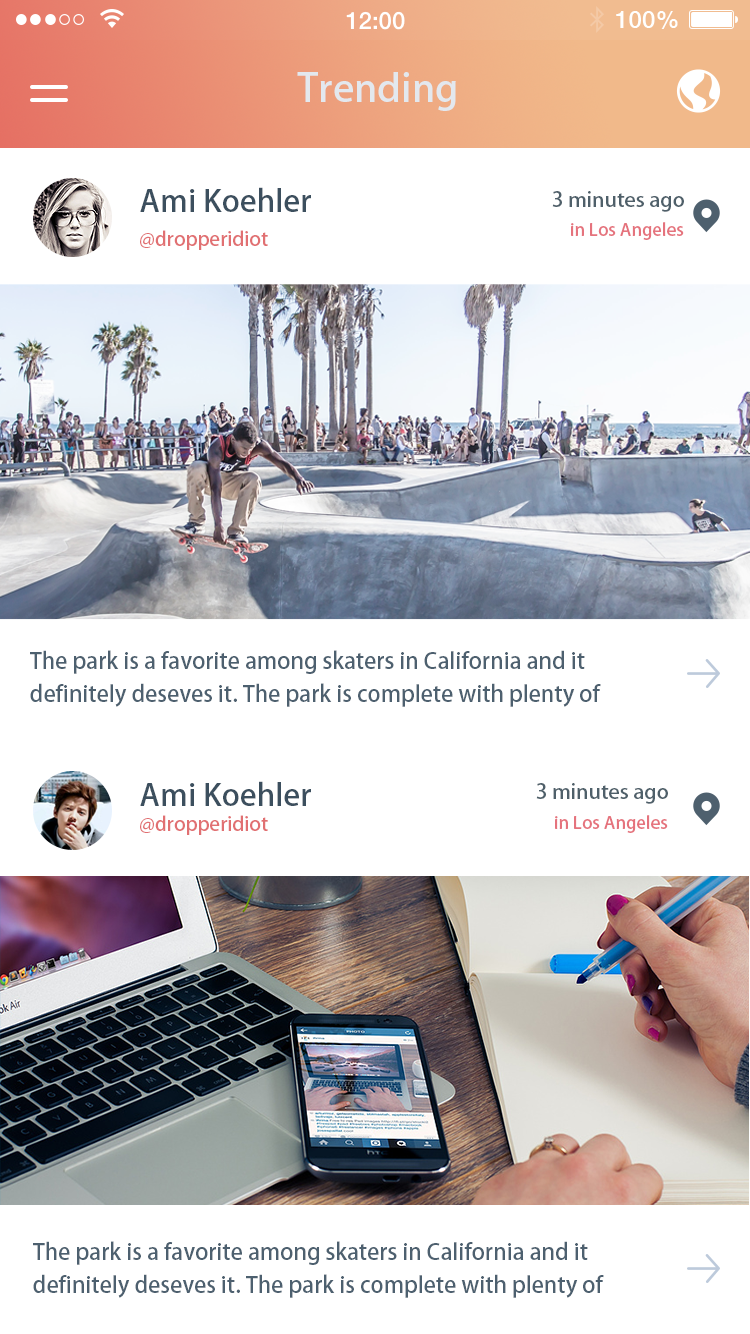
<style>
.page{position:relative;width:750px;height:1334px;background:#ffffff}
.page>*{position:absolute;margin:0}
.t1{font:38px "AdobeHeitiStd-Regular";color:#e3e8ee;scale:1.03 1}
.t2{font:30px "AdobeHeitiStd-Regular";color:#3c4f5e;scale:1.03 1}
.t3{font:20px "AdobeHeitiStd-Regular";color:#4f606a;scale:1.03 1}
.t4{font:17px "AdobeHeitiStd-Regular";color:#e5737d;scale:1.03 1}
.t5{font:19px "AdobeHeitiStd-Regular";color:#e17072;scale:1.03 1}
.t6{font:22px/33px "AdobeHeitiStd-Regular";color:#4d606f}
</style>
<div class="page">
<p class="t1" style="left:297px;top:72px;width:159px;height:39px">Trending</p>
<p class="t2" style="left:140px;top:187px;width:171px;height:25px">Ami Koehler</p>
<p class="t3" style="left:552px;top:191px;width:132px;height:21px">3 minutes ago</p>
<p class="t4" style="left:571px;top:222px;width:113px;height:18px">in Los Angeles</p>
<p class="t5" style="left:140px;top:230px;width:128px;height:20px">@dropperidiot</p>
<p class="t6" style="left:30px;top:650px;width:571px;height:57px">The park is a favorite among skaters in California and it <br>definitely deseves it. The park is complete with plenty of</p>
<p class="t2" style="left:140px;top:781px;width:171px;height:25px">Ami Koehler</p>
<p class="t3" style="left:536px;top:783px;width:132px;height:21px">3 minutes ago</p>
<p class="t5" style="left:140px;top:815px;width:128px;height:20px">@dropperidiot</p>
<p class="t4" style="left:555px;top:815px;width:113px;height:18px">in Los Angeles</p>
<p class="t6" style="left:33px;top:1241px;width:571px;height:57px">The park is a favorite among skaters in California and it <br>definitely deseves it. The park is complete with plenty of</p>
</div>
